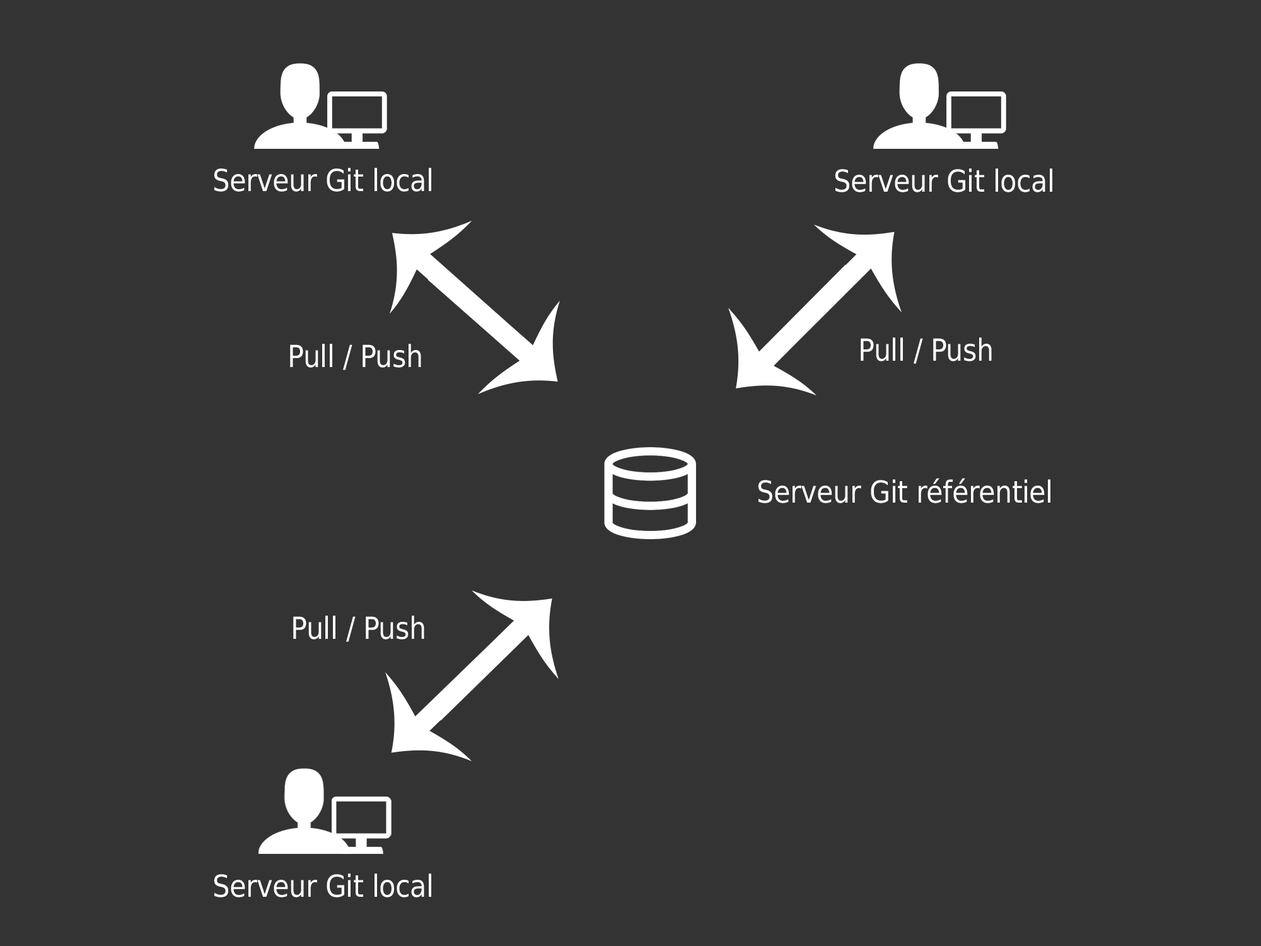
<style>
.page{position:relative;width:1261px;height:946px;background:#333333}
.page>*{position:absolute;margin:0}
.t1{font:30.4px "DejaVuSansCondensed";letter-spacing:-0.01em;color:#ffffff}
</style>
<div class="page">
<p class="t1" style="left:214px;top:168px;width:217px;height:24px">Serveur Git local</p>
<p class="t1" style="left:835px;top:168px;width:217px;height:24px">Serveur Git local</p>
<p class="t1" style="left:861px;top:337px;width:131px;height:27px">Pull / Push</p>
<p class="t1" style="left:290px;top:344px;width:131px;height:26px">Pull / Push</p>
<p class="t1" style="left:758px;top:478px;width:292px;height:25px">Serveur Git référentiel</p>
<p class="t1" style="left:293px;top:615px;width:131px;height:27px">Pull / Push</p>
<p class="t1" style="left:214px;top:873px;width:217px;height:24px">Serveur Git local</p>
</div>
